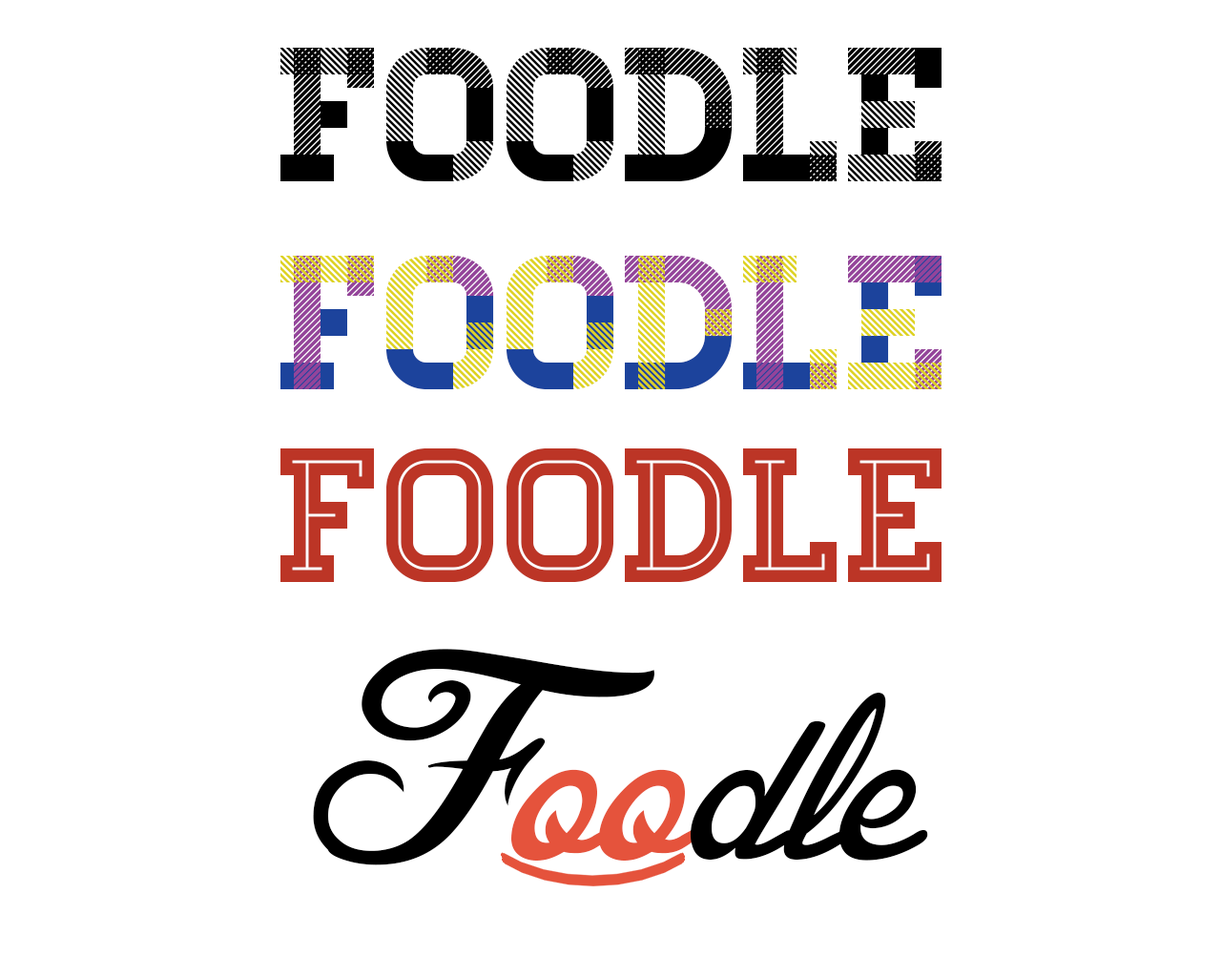
<style>
.page{position:relative;width:1221px;height:977px;background:#ffffff}
.page>*{position:absolute;margin:0}
.t1{font:190.8px "Homestead-Display";color:#000000}
.t2{font:190.8px "Homestead-One";color:#1c439c}
.t3{font:190.8px "Homestead-Three";color:#ded321}
.t4{font:190.8px "Homestead-Two";color:#94449a}
.t5{font:190.8px "Homestead-Inline";color:#bc3526}
.t6{font:381.5px "BlessedDay";color:#000000}
.t7{font:381.5px "BlessedDay";color:#e5533c}
</style>
<div class="page">
<p class="t1" style="left:280px;top:48px;width:661px;height:133px">Foodle</p>
<p class="t2" style="left:280px;top:256px;width:661px;height:133px">Foodle</p>
<p class="t3" style="left:280px;top:256px;width:661px;height:133px">Foodle</p>
<p class="t4" style="left:294px;top:256px;width:647px;height:133px">Foodle</p>
<p class="t5" style="left:280px;top:448px;width:661px;height:134px">Foodle</p>
<p class="t6" style="left:313px;top:649px;width:615px;height:216px">F<span class="t7">oo</span>dle</p>
</div>
